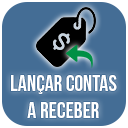
<style>
.page{position:relative;width:128px;height:128px;background:#446d95}
.page>*{position:absolute;margin:0}
.t1{font:22px "BebasNeue";color:#ffffff}
</style>
<div class="page">
<p class="t1" style="left:11px;top:75px;width:106px;height:43px;text-align:center">Lançar contas a RECEBER</p>
</div>
